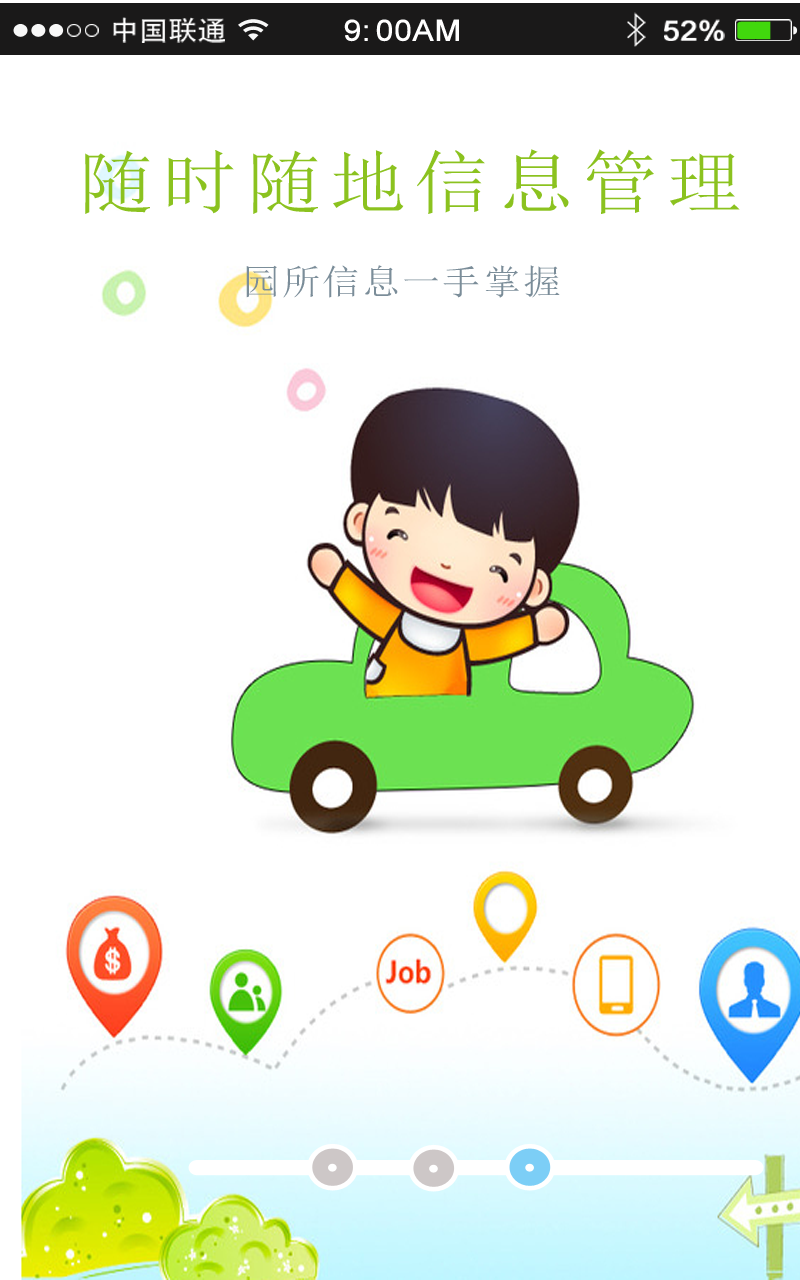
<style>
.page{position:relative;width:800px;height:1280px;background:#ffffff}
.page>*{position:absolute;margin:0}
.t1{font:26.8px "AdobeHeitiStd-Regular";color:#ffffff;scale:1.09 1}
.t2{font:29.2px "ArialMT";color:#ffffff;font-weight:bold;scale:1.09 1}
.t3{font:28px "ArialMT";color:#ffffff;font-weight:bold;scale:1.09 1}
.t4{font:70px "SimSun";letter-spacing:0.1em;color:#8bc21f;scale:1.09 1}
.t5{font:35px "SimSun";letter-spacing:0.05em;color:#7b8d99;scale:1.09 1}
</style>
<div class="page">
<p class="t1" style="left:113px;top:17px;width:112px;height:26px">中国联通</p>
<p class="t2" style="left:344px;top:19px;width:115px;height:23px">9:00AM</p>
<p class="t3" style="left:664px;top:19px;width:61px;height:22px">52%</p>
<p class="t4" style="left:85px;top:149px;width:655px;height:65px">随时随地信息管理</p>
<p class="t5" style="left:246px;top:265px;width:314px;height:33px">园所信息一手掌握</p>
</div>
